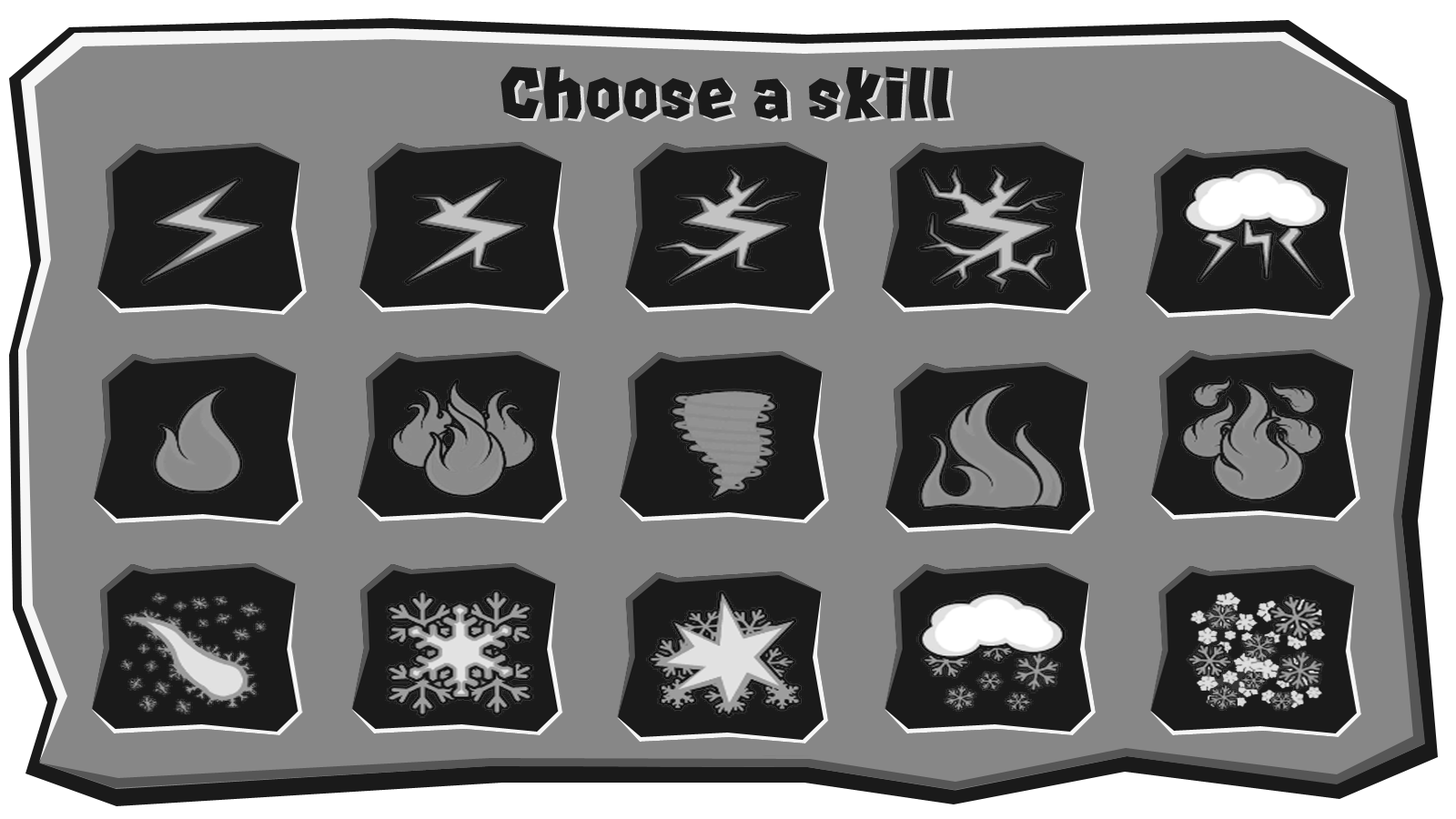
<style>
.page{position:relative;width:1456px;height:819px;background:#878787}
.page>*{position:absolute;margin:0}
.t1{font:65.5px "Rocks__G";color:#1a1a1a;scale:1.14 1}
</style>
<div class="page">
<p class="t1" style="left:500px;top:66px;width:451px;height:54px">Choose a skill</p>
</div>
